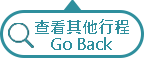
<style>
.page{position:relative;width:144px;height:58px;background:#ffffff}
.page>*{position:absolute;margin:0}
.t1{font:16px "MicrosoftJhengHeiBold";color:#2f8f9d}
</style>
<div class="page">
<p class="t1" style="left:35px;top:19px;width:94px;height:15px">查看其他行程</p>
<p class="t1" style="left:51px;top:37px;width:61px;height:13px">Go Back</p>
</div>
